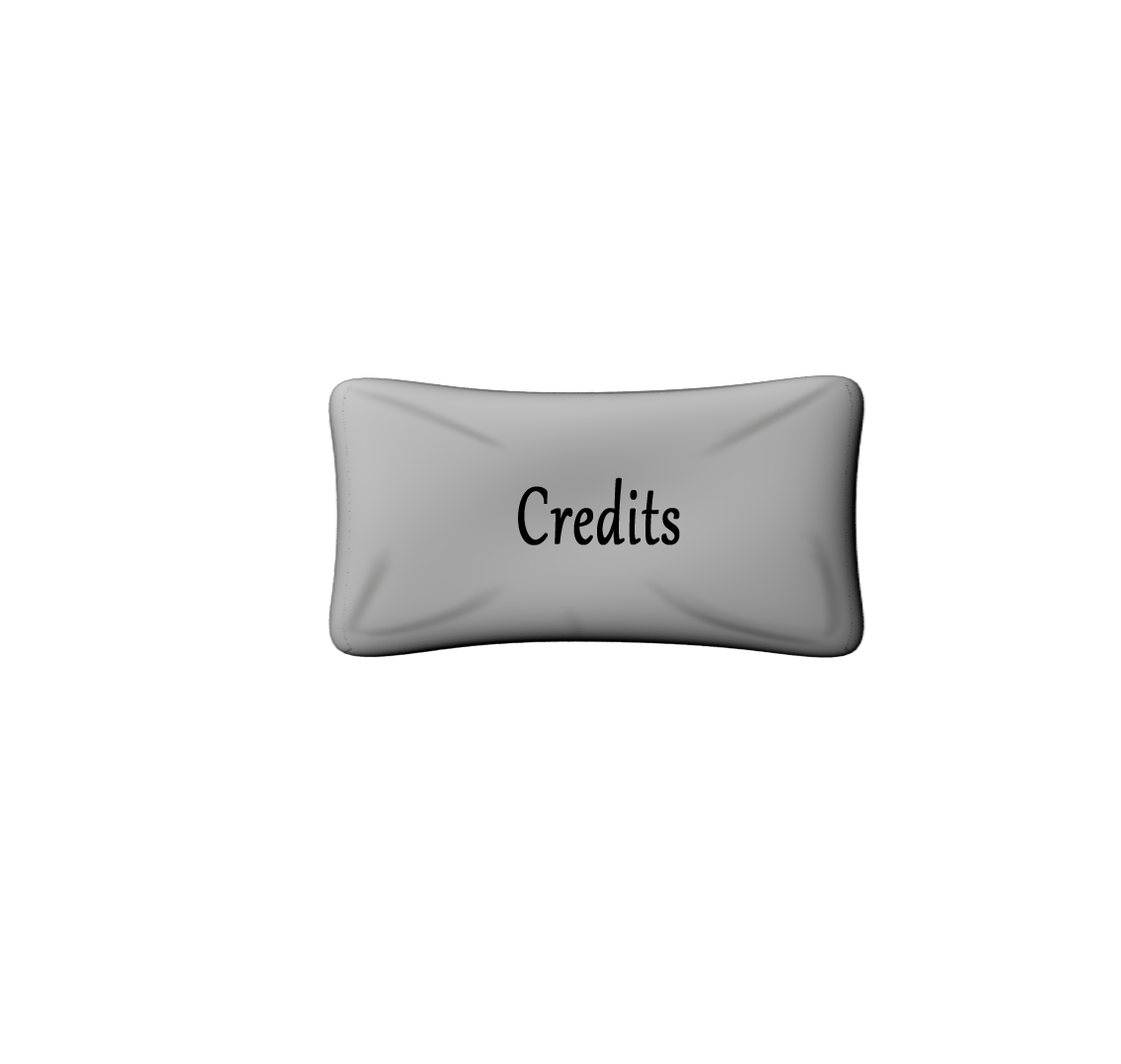
<style>
.page{position:relative;width:1121px;height:1064px;background:#ffffff}
.page>*{position:absolute;margin:0}
.t1{font:97px "Gabriola";letter-spacing:0.02em;color:#000000;font-weight:bold;scale:0.67 1}
</style>
<div class="page">
<p class="t1" style="left:518px;top:477px;width:162px;height:68px">Credits</p>
</div>
